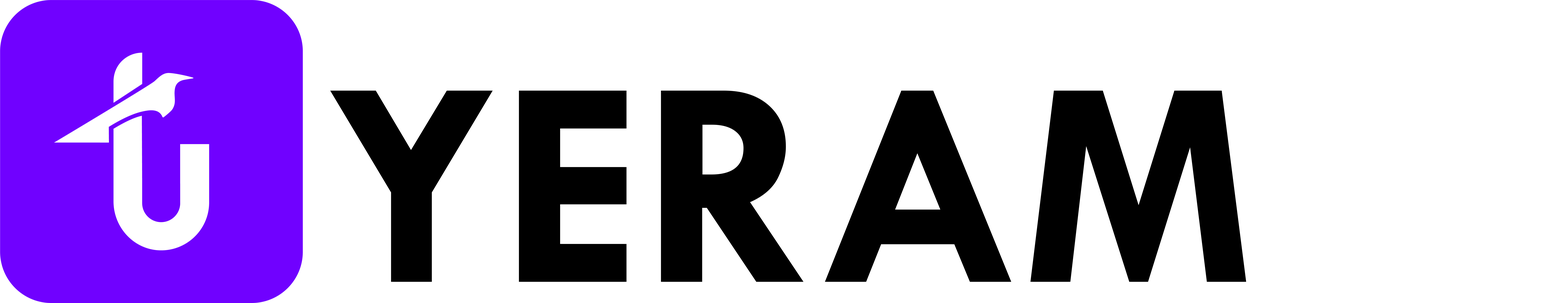
<style>
.page{position:relative;width:1568px;height:303px;background:#ffffff}
.page>*{position:absolute;margin:0}
.t1{font:298px "TwCenMT-Bold";color:#000000;font-variant:small-caps}
</style>
<div class="page">
<p class="t1" style="left:330px;top:91px;width:916px;height:191px">YERAM</p>
</div>
